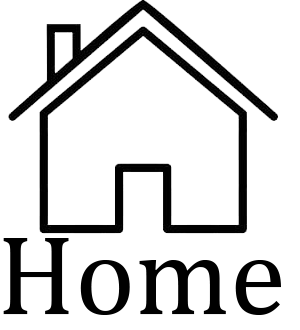
<style>
.page{position:relative;width:300px;height:330px;background:#ffffff}
.page>*{position:absolute;margin:0}
.t1{font:113.6px "CambriaMath";color:#000000}
</style>
<div class="page">
<p class="t1" style="left:3px;top:238px;width:278px;height:77px">Home</p>
</div>
